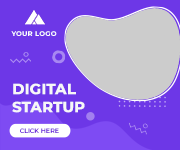
<style>
.page{position:relative;width:180px;height:150px;background:#6d37e7}
.page>*{position:absolute;margin:0}
.t1{font:7px "Montserrat-Bold";letter-spacing:0.025em;color:#ffffff}
.t2{font:14.6px/18px "Montserrat-Bold";color:#f7f7f7;font-weight:bold}
.t3{font:6.3px "Montserrat-SemiBold"}
</style>
<div class="page">
<p class="t1" style="left:11px;top:31px;width:46px;height:5px">YOUR LOGO</p>
<p class="t2" style="left:12px;top:83px;width:73px;height:30px">DIGITAL<br>STARTUP</p>
<p class="t3" style="left:20px;top:128px;width:39px;height:5px">CLICK HERE</p>
</div>
